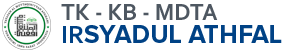
<style>
.page{position:relative;width:287px;height:52px;background:#ffffff}
.page>*{position:absolute;margin:0}
.t1{font:24.4px "Corbel-Bold";color:#4e5761;scale:0.97 1}
.t2{font:26.1px "ProximaNova-Bold";color:#004285}
.t3{font:26.1px "Corbel-Bold";color:#004285}
</style>
<div class="page">
<p class="t1" style="left:61px;top:4px;width:157px;height:16px">TK - KB - MDTA</p>
<p class="t2" style="left:63px;top:25px;width:219px;height:18px"><span class="t3">IR</span>SYADUL ATHFAL</p>
</div>
